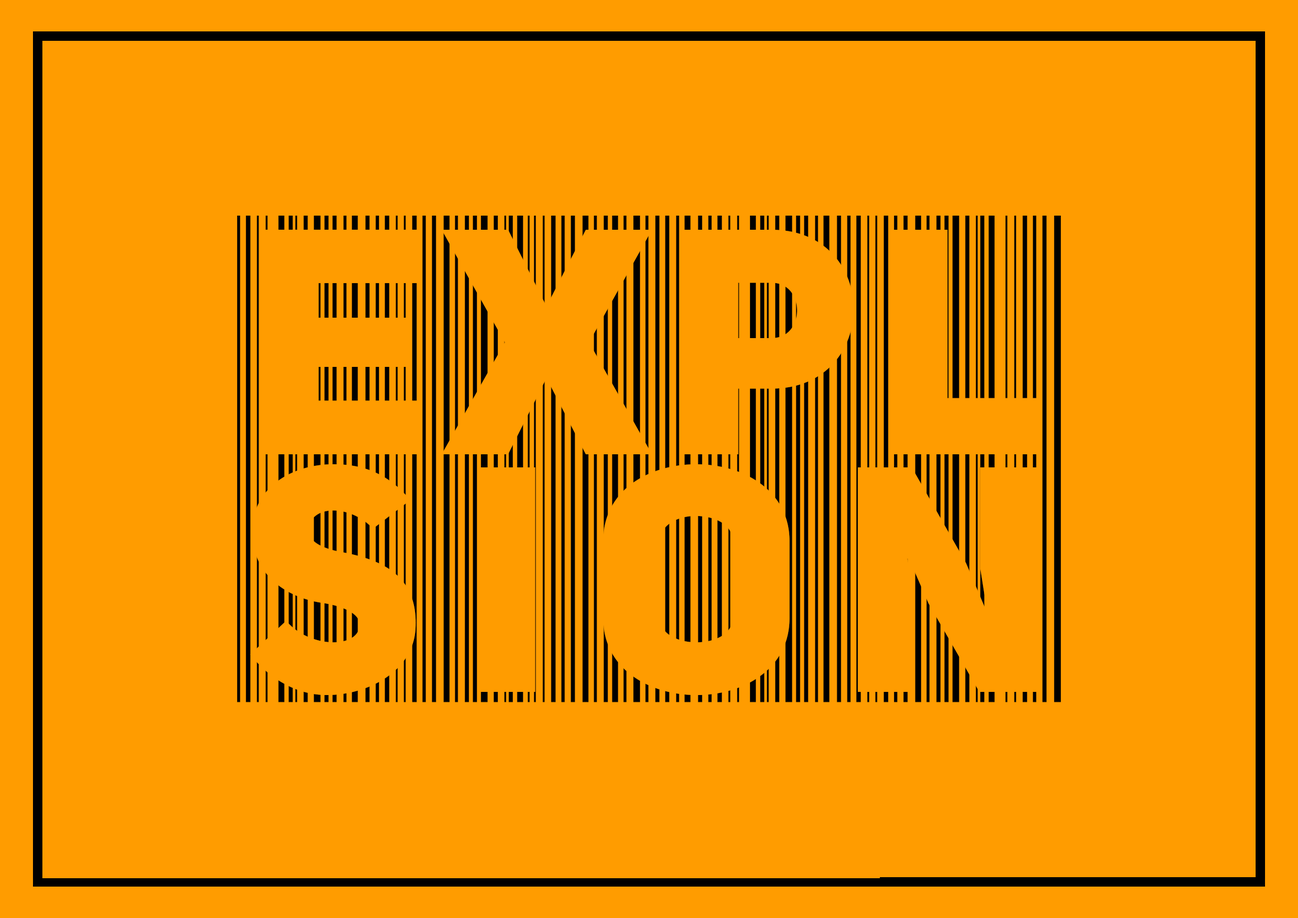
<style>
.page{position:relative;width:1298px;height:918px;background:#ff9c00}
.page>*{position:absolute;margin:0}
.t1{font:317.5px/498.7px "UniSansHeavyCAPS";letter-spacing:0.04em;color:#ff9c00}
.t2{font:317.5px/237.9px "UniSansHeavyCAPS";letter-spacing:0.12em;color:#ff9c00}
</style>
<div class="page">
<p class="t1" style="left:250px;top:229px;width:789px;height:467px">EXPL<br><span class="t2">SIoN</span></p>
</div>
